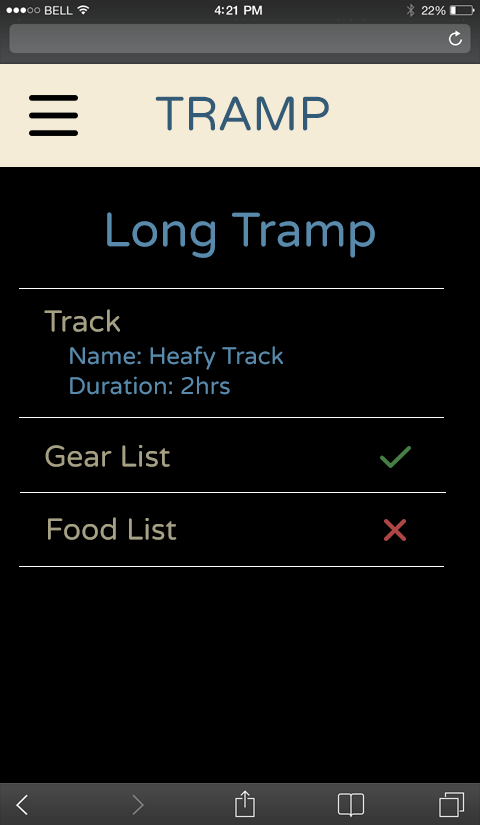
<style>
.page{position:relative;width:480px;height:825px;background:#000000}
.page>*{position:absolute;margin:0}
.t1{font:48px "VarelaRound-Regular";color:#335a76;text-transform:uppercase}
.t2{font:48px "VarelaRound-Regular";color:#598aab}
.t3{font:30px "VarelaRound-Regular";color:#a6a084}
.t4{font:24px "VarelaRound-Regular";color:#598aab}
</style>
<div class="page">
<p class="t1" style="left:155px;top:96px;width:174px;height:35px">TRAMP</p>
<p class="t2" style="left:107px;top:212px;width:268px;height:46px">Long Tramp</p>
<p class="t3" style="left:44px;top:309px;width:76px;height:23px">Track</p>
<p class="t4" style="left:70px;top:346px;width:213px;height:24px">Name: Heafy Track</p>
<p class="t4" style="left:70px;top:376px;width:160px;height:19px">Duration: 2hrs</p>
<p class="t3" style="left:45px;top:445px;width:125px;height:22px">Gear List</p>
<p class="t3" style="left:48px;top:517px;width:129px;height:23px">Food List</p>
</div>
